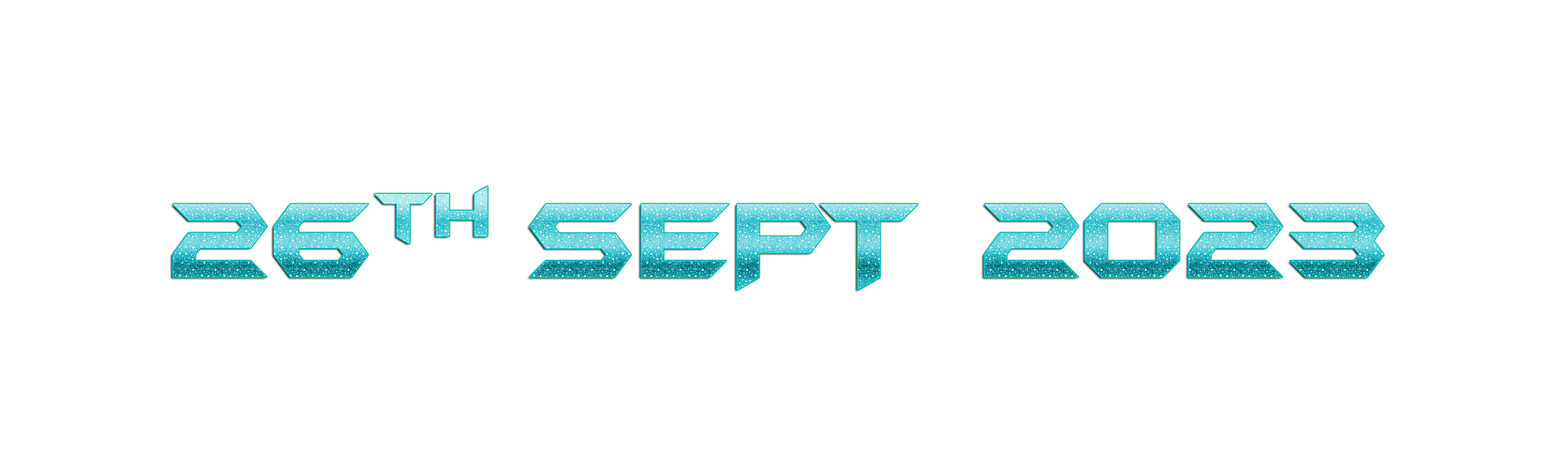
<style>
.page{position:relative;width:1568px;height:474px;background:#ffffff}
.page>*{position:absolute;margin:0}
.t1{font:124px "BatmanForeverAlternate";letter-spacing:-0.02em;text-transform:uppercase}
.t2{font:124px "BatmanForeverAlternate";letter-spacing:-0.02em}
</style>
<div class="page">
<p class="t1" style="left:173px;top:186px;width:1211px;height:104px"><span class="t2">26th </span>Sept 2023</p>
</div>
